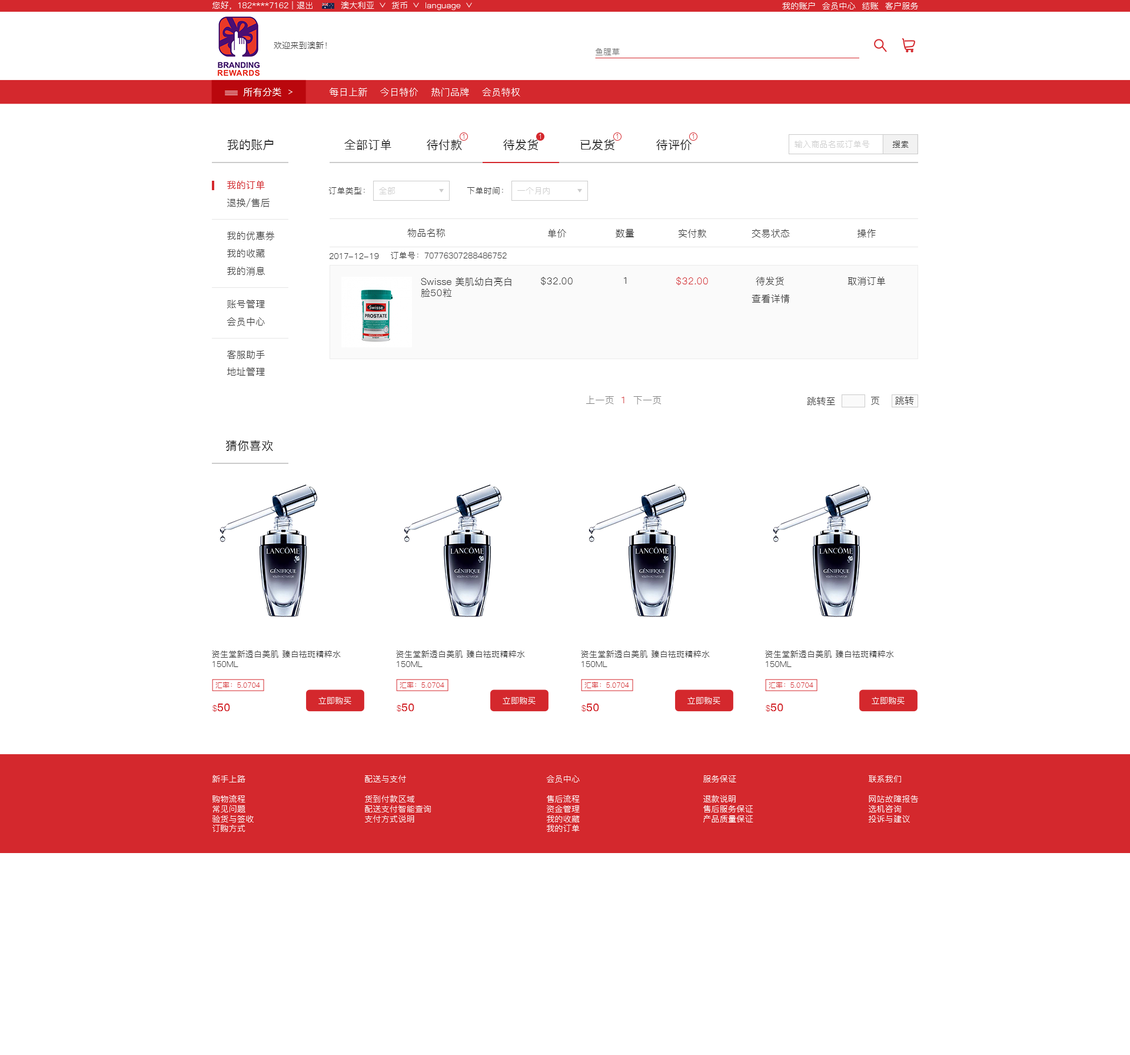
<style>
.page{position:relative;width:1130px;height:1055px;background:#ffffff}
.page>*{position:absolute;margin:0}
.t1{font:8.2px "PingFang-SC-Regular";letter-spacing:0.02em;color:#ffffff}
.t2{font:8.2px "PingFang-SC-Regular";letter-spacing:0.02em;color:#333333}
.t3{font:8.2px "PingFang-SC-Regular";letter-spacing:0.02em;color:#767676}
.t4{font:9.4px "PingFang-SC-Medium";letter-spacing:0.02em;color:#ffffff}
.t5{font:9.4px "PingFang-SC-Regular";letter-spacing:0.02em;color:#ffffff}
.t6{font:7.1px "PingFang-SC-Regular";letter-spacing:0.02em;color:#d4282d}
.t7{font:7.1px "PingFang-SC-Regular";letter-spacing:0.02em;color:#fefefe}
.t8{font:7.1px "PingFang-SC-Regular";letter-spacing:0.02em;color:#d52d32}
.t9{font:11.8px "PingFang-SC-Medium";letter-spacing:0.02em;color:#333333}
.t10{font:8.2px "PingFang-SC-Regular";letter-spacing:0.02em;color:#cccccc}
.t11{font:9.4px "PingFang-SC-Medium";letter-spacing:0.02em;color:#d4282d}
.t12{font:9.4px "PingFang-SC-Regular";letter-spacing:0.02em;color:#343434}
.t13{font:8.2px "PingFang-SC-Regular";letter-spacing:0.02em;color:#343434}
.t14{font:9.4px "PingFang-SC-Regular";letter-spacing:0.02em;color:#333333}
.t15{font:9.4px "PingFang-SC-Regular";letter-spacing:0.02em;color:#d4282d}
.t16{font:9.4px "PingFang-SC-Regular";letter-spacing:0.02em;color:#808080}
.t17{font:9.4px "PingFang-SC-Regular";letter-spacing:0.02em;color:#353535}
.t18{font:10.6px "PingFang-SC-Bold";letter-spacing:0.02em;color:#d4282d}
.t19{font:8.2px "PingFang-SC-Regular";letter-spacing:0.02em;color:#d4282d}
.t20{font:8.2px "PingFang-SC-Regular";letter-spacing:0.02em;color:#fffefe}
</style>
<div class="page">
<p class="t1" style="left:213px;top:1px;width:100px;height:8px">您好，182****7162 | 退出</p>
<p class="t1" style="left:341px;top:1px;width:33px;height:8px">澳大利亚</p>
<p class="t1" style="left:391px;top:2px;width:16px;height:7px">货币</p>
<p class="t1" style="left:426px;top:2px;width:35px;height:8px">language</p>
<p class="t1" style="left:782px;top:2px;width:136px;height:8px">我的账户  会员中心  结账  客户服务</p>
<p class="t2" style="left:274px;top:41px;width:53px;height:8px">欢迎来到澳新！</p>
<p class="t3" style="left:595px;top:48px;width:25px;height:7px">鱼腥草</p>
<p class="t4" style="left:243px;top:88px;width:38px;height:9px">所有分类</p>
<p class="t5" style="left:330px;top:88px;width:190px;height:9px">每日上新    今日特价    热门品牌    会员特权</p>
<p class="t6" style="left:463px;top:134px;width:1px;height:5px">1</p>
<p class="t7" style="left:539px;top:134px;width:2px;height:5px">1</p>
<p class="t8" style="left:616px;top:134px;width:2px;height:5px">1</p>
<p class="t8" style="left:692px;top:134px;width:2px;height:5px">1</p>
<p class="t9" style="left:227px;top:140px;width:47px;height:10px">我的账户</p>
<p class="t9" style="left:344px;top:140px;width:47px;height:10px">全部订单</p>
<p class="t9" style="left:427px;top:139px;width:35px;height:11px">待付款</p>
<p class="t9" style="left:503px;top:140px;width:35px;height:10px">待发货</p>
<p class="t9" style="left:580px;top:140px;width:35px;height:10px">已发货</p>
<p class="t9" style="left:656px;top:140px;width:36px;height:10px">待评价</p>
<p class="t10" style="left:795px;top:140px;width:75px;height:8px">输入商品名或订单号</p>
<p class="t2" style="left:892px;top:141px;width:17px;height:7px">搜索</p>
<p class="t11" style="left:227px;top:181px;width:38px;height:9px">我的订单</p>
<p class="t2" style="left:328px;top:187px;width:37px;height:7px">订单类型：</p>
<p class="t10" style="left:379px;top:187px;width:16px;height:7px">全部</p>
<p class="t2" style="left:467px;top:187px;width:36px;height:7px">下单时间：</p>
<p class="t10" style="left:517px;top:187px;width:33px;height:7px">一个月内</p>
<p class="t12" style="left:227px;top:198px;width:43px;height:9px">退换/售后</p>
<p class="t12" style="left:227px;top:231px;width:47px;height:9px">我的优惠券</p>
<p class="t12" style="left:407px;top:228px;width:38px;height:9px">物品名称</p>
<p class="t12" style="left:548px;top:229px;width:18px;height:9px">单价</p>
<p class="t12" style="left:616px;top:229px;width:19px;height:9px">数量</p>
<p class="t12" style="left:679px;top:229px;width:27px;height:9px">实付款</p>
<p class="t12" style="left:752px;top:229px;width:38px;height:9px">交易状态</p>
<p class="t12" style="left:858px;top:229px;width:18px;height:9px">操作</p>
<p class="t12" style="left:227px;top:249px;width:38px;height:9px">我的收藏</p>
<p class="t13" style="left:330px;top:253px;width:49px;height:6px">2017-12-19</p>
<p class="t13" style="left:391px;top:252px;width:116px;height:7px">订单号：70776307288486752</p>
<p class="t12" style="left:227px;top:267px;width:38px;height:9px">我的消息</p>
<p class="t14" style="left:421px;top:277px;width:91px;height:20px">Swisse 美肌幼白亮白<br>脸50粒</p>
<p class="t12" style="left:541px;top:277px;width:32px;height:9px">$32.00</p>
<p class="t12" style="left:624px;top:277px;width:2px;height:7px">1</p>
<p class="t15" style="left:676px;top:277px;width:32px;height:9px">$32.00</p>
<p class="t12" style="left:756px;top:277px;width:28px;height:9px">待发货</p>
<p class="t14" style="left:848px;top:277px;width:37px;height:9px">取消订单</p>
<p class="t12" style="left:227px;top:300px;width:38px;height:8px">账号管理</p>
<p class="t12" style="left:752px;top:294px;width:38px;height:9px">查看详情</p>
<p class="t12" style="left:227px;top:317px;width:38px;height:9px">会员中心</p>
<p class="t12" style="left:227px;top:350px;width:38px;height:9px">客服助手</p>
<p class="t12" style="left:227px;top:367px;width:38px;height:9px">地址管理</p>
<p class="t16" style="left:586px;top:396px;width:76px;height:8px">上一页<span class="t15">  1  </span>下一页</p>
<p class="t17" style="left:807px;top:397px;width:28px;height:9px">跳转至</p>
<p class="t17" style="left:871px;top:397px;width:9px;height:8px">页</p>
<p class="t17" style="left:895px;top:396px;width:19px;height:9px">跳转</p>
<p class="t9" style="left:226px;top:440px;width:47px;height:11px">猜你喜欢</p>
<p class="t2" style="left:212px;top:650px;width:129px;height:17px">资生堂新透白美肌 臻白祛斑精粹水<br>150ML</p>
<p class="t2" style="left:396px;top:650px;width:129px;height:17px">资生堂新透白美肌 臻白祛斑精粹水<br>150ML</p>
<p class="t2" style="left:581px;top:650px;width:129px;height:17px">资生堂新透白美肌 臻白祛斑精粹水<br>150ML</p>
<p class="t2" style="left:765px;top:650px;width:129px;height:17px">资生堂新透白美肌 臻白祛斑精粹水<br>150ML</p>
<p class="t6" style="left:215px;top:682px;width:45px;height:6px">汇率：5.0704</p>
<p class="t6" style="left:400px;top:682px;width:44px;height:6px">汇率：5.0704</p>
<p class="t6" style="left:585px;top:682px;width:44px;height:6px">汇率：5.0704</p>
<p class="t6" style="left:769px;top:682px;width:45px;height:6px">汇率：5.0704</p>
<p class="t1" style="left:318px;top:697px;width:33px;height:7px">立即购买</p>
<p class="t1" style="left:503px;top:697px;width:33px;height:7px">立即购买</p>
<p class="t1" style="left:688px;top:697px;width:33px;height:7px">立即购买</p>
<p class="t1" style="left:872px;top:697px;width:33px;height:7px">立即购买</p>
<p class="t18" style="left:213px;top:704px;width:17px;height:8px"><span class="t19">$</span>50</p>
<p class="t18" style="left:397px;top:704px;width:17px;height:8px"><span class="t19">$</span>50</p>
<p class="t18" style="left:582px;top:704px;width:17px;height:8px"><span class="t19">$</span>50</p>
<p class="t18" style="left:766px;top:704px;width:18px;height:8px"><span class="t19">$</span>50</p>
<p class="t20" style="left:212px;top:775px;width:42px;height:57px">新手上路<br><br>购物流程<br>常见问题<br>验货与签收<br>订购方式</p>
<p class="t20" style="left:365px;top:775px;width:66px;height:47px">配送与支付<br><br>货到付款区域<br>配送支付智能查询<br>支付方式说明</p>
<p class="t20" style="left:546px;top:775px;width:34px;height:57px">会员中心<br><br>售后流程<br>资金管理<br>我的收藏<br>我的订单</p>
<p class="t20" style="left:704px;top:775px;width:50px;height:47px">服务保证<br><br>退款说明<br>售后服务保证<br>产品质量保证</p>
<p class="t20" style="left:868px;top:775px;width:50px;height:47px">联系我们<br><br>网站故障报告<br>选机咨询<br>投诉与建议</p>
</div>
